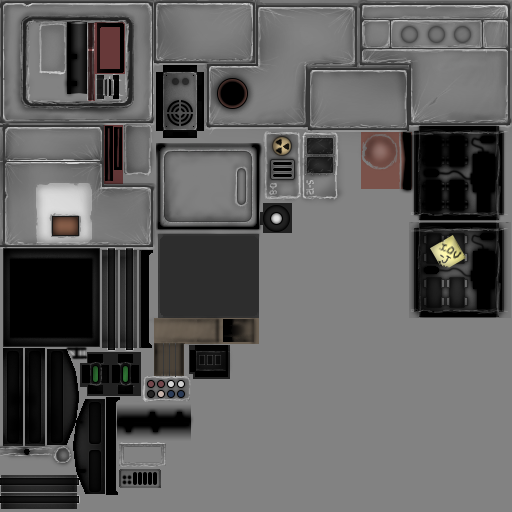
<style>
.page{position:relative;width:512px;height:512px;background:#828282}
.page>*{position:absolute;margin:0}
.t1{font:11px "NasalizationRg-Regular";color:#a5a5a5;scale:0.6 1}
.t2{font:11px "NasalizationRg-Regular";color:#b3b3b3;scale:0.6 1}
</style>
<div class="page">
<p class="t1" style="left:269px;top:183px;width:8px;height:12px;rotate:90deg">D-8</p>
<p class="t2" style="left:306px;top:180px;width:8px;height:15px;rotate:90deg">S-12</p>
</div>
